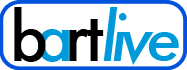
<style>
.page{position:relative;width:187px;height:70px;background:#ffffff}
.page>*{position:absolute;margin:0}
.t1{font:64.5px "Futura-Medium";letter-spacing:0.04em;color:#000000}
.t2{font:64.5px "Futura-MediumItalic";letter-spacing:-0.1em;color:#009ada}
.t3{font:64.5px "Futura-Medium";letter-spacing:0.04em;color:#009ada}
</style>
<div class="page">
<p class="t1" style="left:14px;top:7px;width:32px;height:55px">b</p>
<p class="t2" style="left:103px;top:7px;width:76px;height:58px">live</p>
<p class="t3" style="left:38px;top:29px;width:31px;height:33px">a</p>
<p class="t1" style="left:69px;top:29px;width:21px;height:32px">r</p>
<p class="t1" style="left:87px;top:19px;width:17px;height:42px">t</p>
</div>
